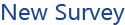
<style>
.page{position:relative;width:125px;height:25px;background:#ffffff}
.page>*{position:absolute;margin:0}
.t1{font:23.1px "SegoeUI";color:#1a4593;scale:1.04 1}
</style>
<div class="page">
<p class="t1" style="left:2px;top:4px;width:123px;height:21px">New Survey</p>
</div>
